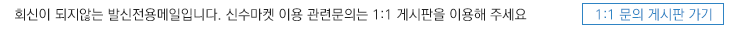
<style>
.page{position:relative;width:750px;height:30px;background:#ffffff}
.page>*{position:absolute;margin:0}
.t1{font:14px "KoPubDotumMedium";color:#212121}
.t2{font:14px "KoPubDotumMedium";color:#2f84c4}
</style>
<div class="page">
<p class="t1" style="left:15px;top:8px;width:512px;height:13px">회신이 되지않는 발신전용메일입니다. 신수마켓 이용 관련문의는 1:1 게시판을 이용해 주세요</p>
<p class="t2" style="left:596px;top:8px;width:116px;height:13px">1:1 문의 게시판 가기</p>
</div>
